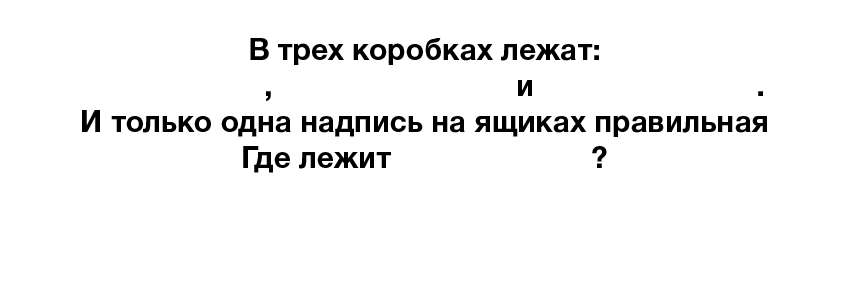
<style>
.page{position:relative;width:850px;height:283px;background:#ffffff}
.page>*{position:absolute;margin:0}
.t1{font:30px "HelveticaNeueCyr-Bold";color:#000000}
</style>
<div class="page">
<p class="t1" style="left:82px;top:38px;width:685px;height:135px;text-align:center">В трех коробках лежат:<br>     ,       и  .<br>И только одна надпись на ящиках правильная<br>Где лежит                        ?</p>
</div>
